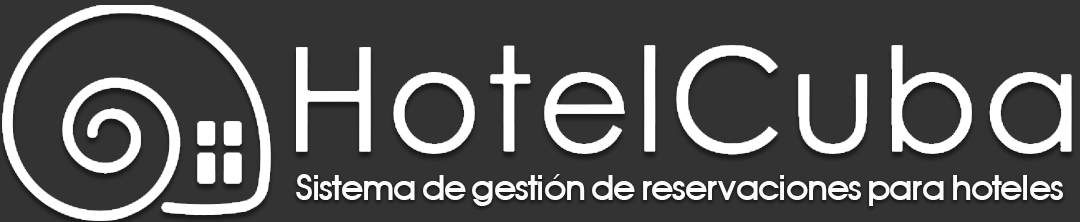
<style>
.page{position:relative;width:1080px;height:222px;background:#333333}
.page>*{position:absolute;margin:0}
.t1{font:32.6px "AuxinMedium";color:#fdfbfb;scale:1.03 1}
</style>
<div class="page">
<p class="t1" style="left:296px;top:174px;width:767px;height:32px">Sistema de gestión de reservaciones para hoteles</p>
</div>
